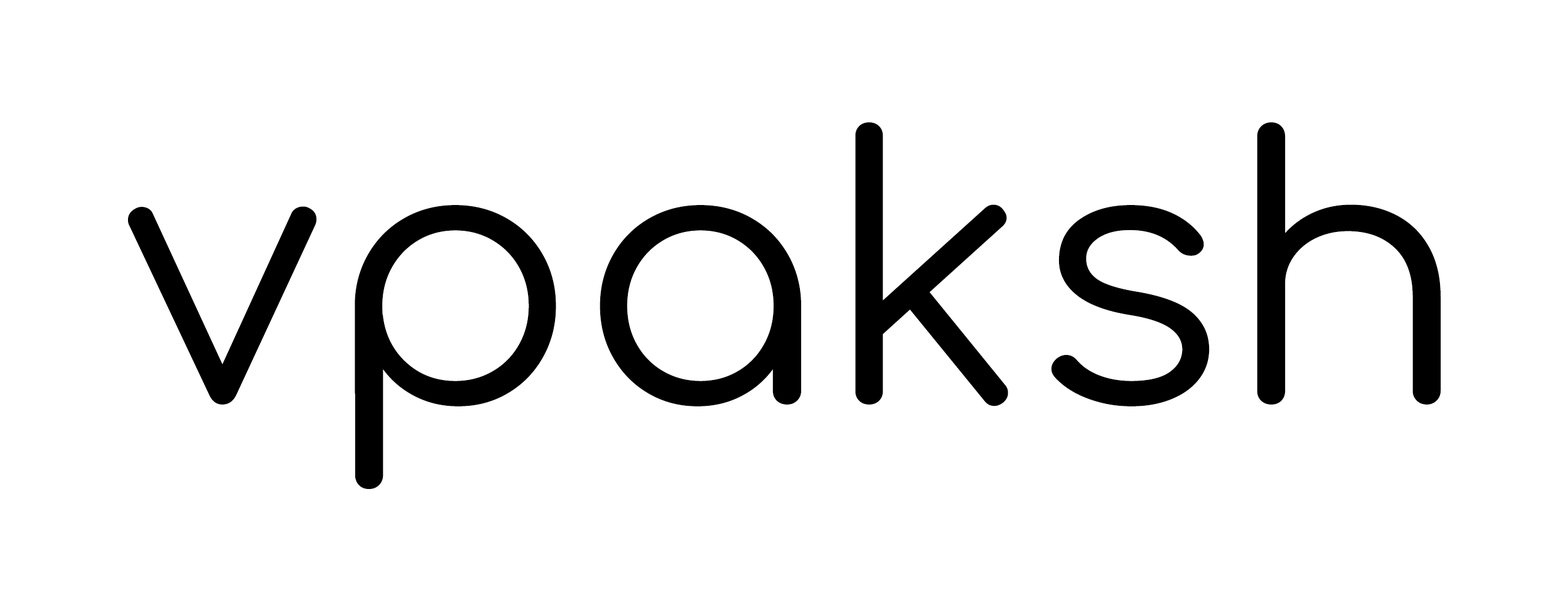
<style>
.page{position:relative;width:1568px;height:612px;background:#ffffff}
.page>*{position:absolute;margin:0}
.t1{font:361.5px "Comfortaa-Regular";color:#000000}
</style>
<div class="page">
<p class="t1" style="left:128px;top:122px;width:1313px;height:367px">vpaksh</p>
</div>
